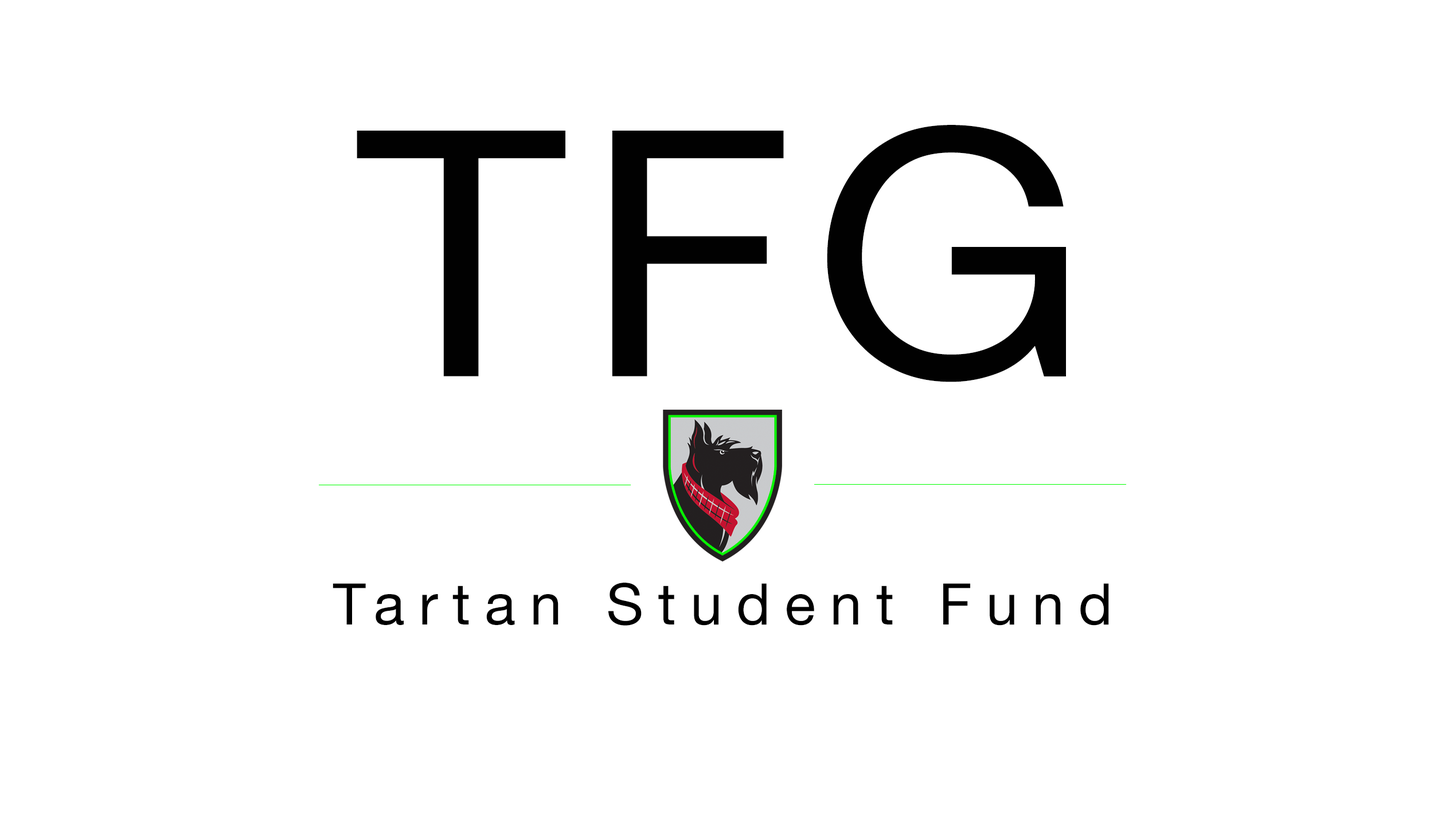
<style>
.page{position:relative;width:1445px;height:825px;background:#ffffff}
.page>*{position:absolute;margin:0}
.t1{font:343.9px "HelveticaNeue";letter-spacing:0.05em;color:#010101;scale:1.06 1}
.t2{font:57.3px "HelveticaNeue";letter-spacing:0.25em;color:#000000}
</style>
<div class="page">
<p class="t1" style="left:357px;top:125px;width:709px;height:257px">TFG</p>
<p class="t2" style="left:332px;top:583px;width:777px;height:43px">Tartan Student Fund</p>
</div>
